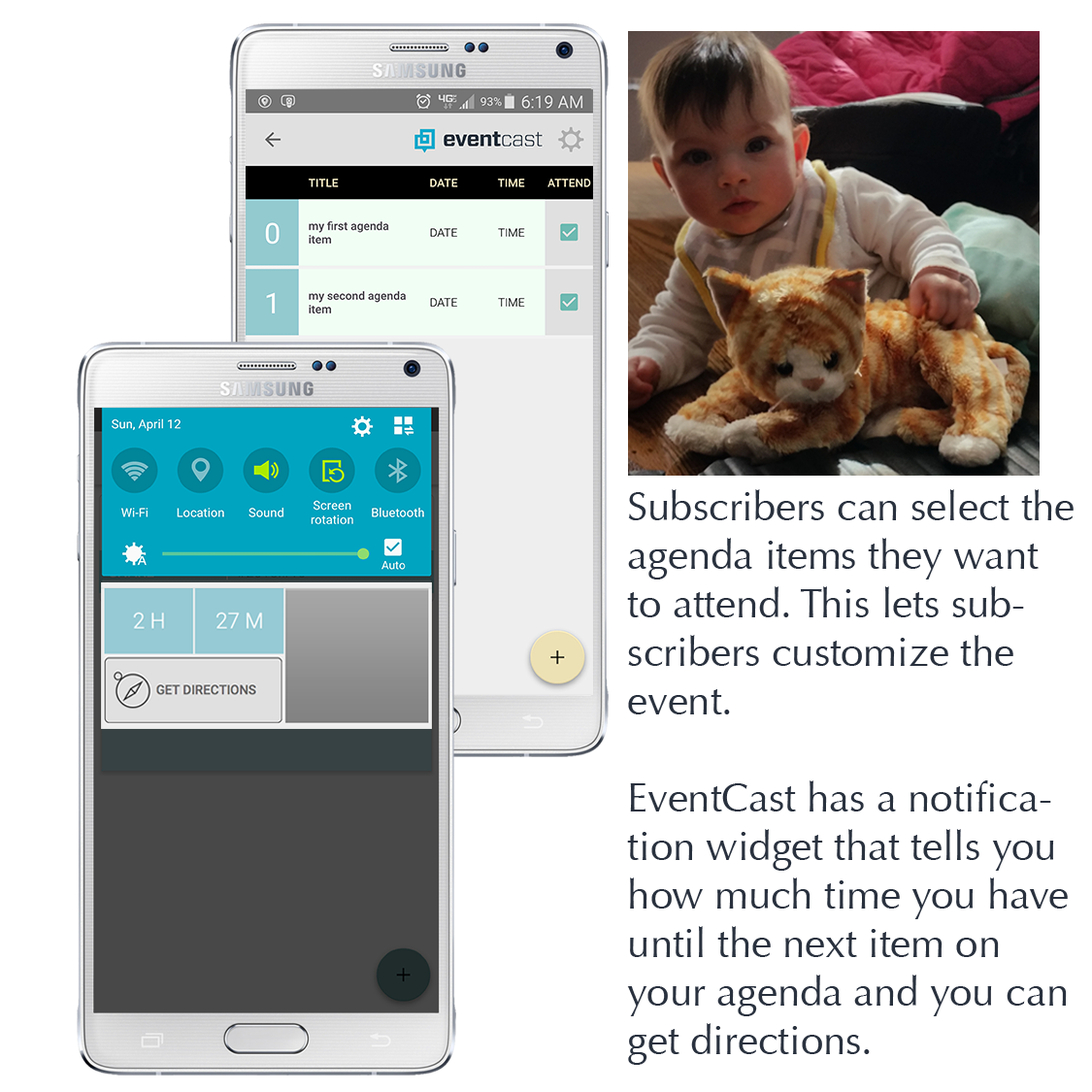
<style>
.page{position:relative;width:1092px;height:1092px;background:#ffffff}
.page>*{position:absolute;margin:0}
.t1{font:40.4px "Optima-Regular";color:#29313e}
</style>
<div class="page">
<p class="t1" style="left:627px;top:489px;width:447px;height:576px">Subscribers can select the agenda items they want to attend. This lets subscribers customize the event.<br><br>EventCast has a notification widget that tells you how much time you have until the next item on your agenda and you can get directions.</p>
</div>
